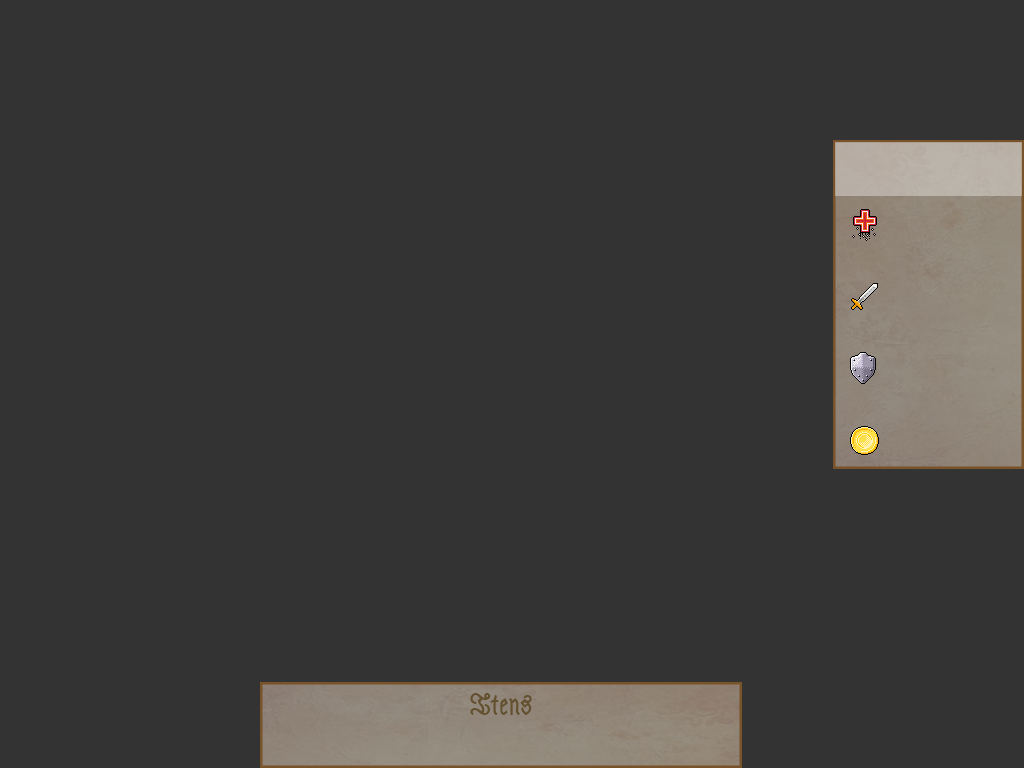
<style>
.page{position:relative;width:1024px;height:768px;background:#333333}
.page>*{position:absolute;margin:0}
.t1{font:27.9px "Astloch-Bold";color:#62502f}
</style>
<div class="page">
<p class="t1" style="left:470px;top:693px;width:62px;height:23px">Itens</p>
</div>
